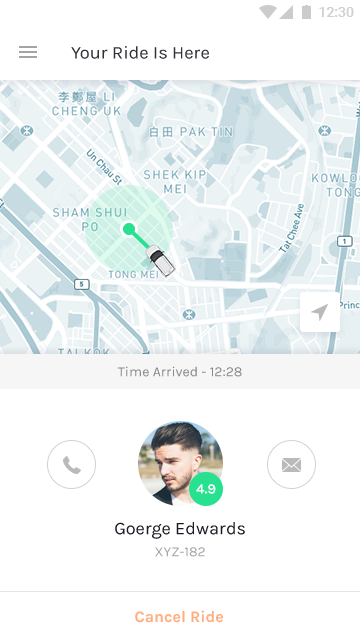
<style>
.page{position:relative;width:360px;height:640px;background:#ffffff}
.page>*{position:absolute;margin:0}
.t1{font:18px "Karla-Regular";color:#1b1b24}
.t2{font:14px "Karla-Regular";color:#88888d}
.t3{font:13.9px "Karla-Bold";color:#ffffff}
.t4{font:14px "Karla-Regular";color:#a4a4a7;text-transform:uppercase}
.t5{font:16px "Karla-Bold";color:#ffac7f}
</style>
<div class="page">
<p class="t1" style="left:71px;top:46px;width:138px;height:13px;opacity:0.9">Your Ride Is Here</p>
<p class="t2" style="left:117px;top:366px;width:125px;height:11px">Time Arrived - 12:28</p>
<p class="t3" style="left:196px;top:484px;width:20px;height:10px">4.9</p>
<p class="t1" style="left:115px;top:522px;width:130px;height:17px">Goerge Edwards</p>
<p class="t4" style="left:155px;top:547px;width:50px;height:10px">XYZ-182</p>
<p class="t5" style="left:135px;top:610px;width:88px;height:13px">Cancel Ride</p>
</div>
